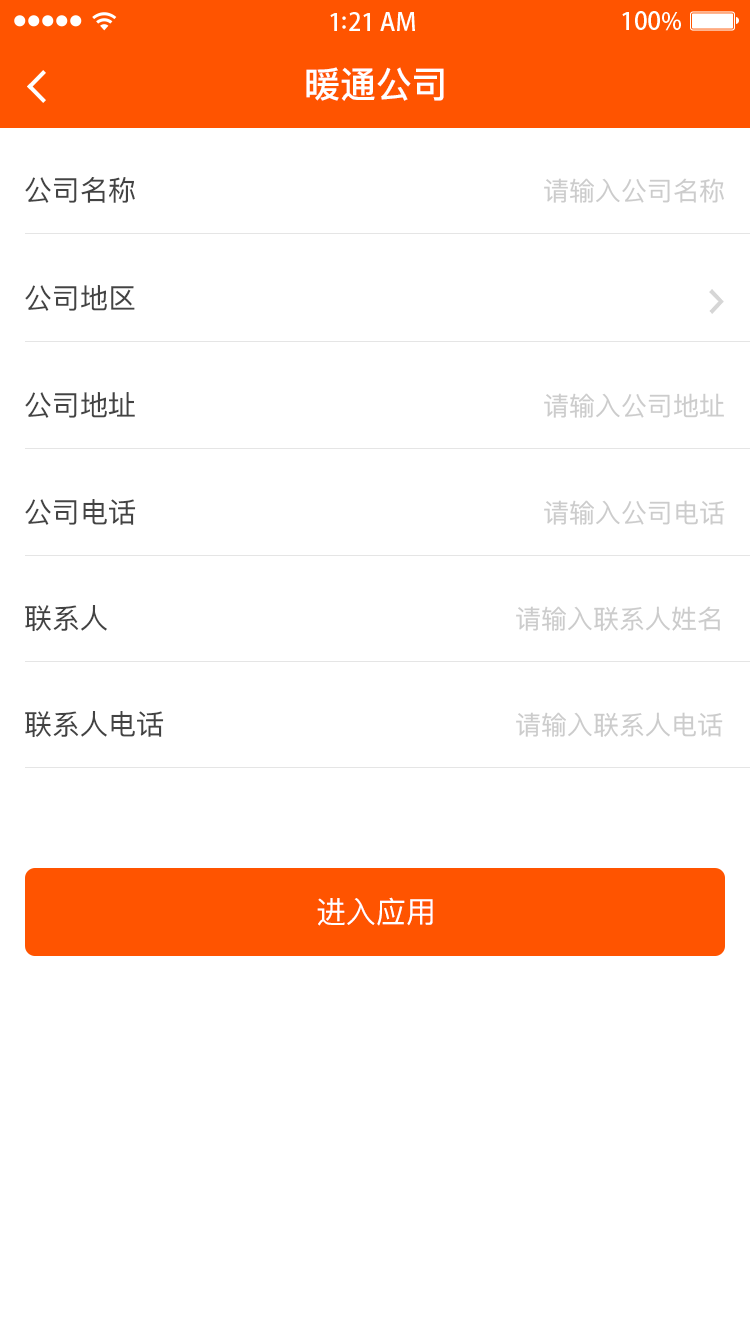
<style>
.page{position:relative;width:750px;height:1334px;background:#ffffff}
.page>*{position:absolute;margin:0}
.t1{font:36px "PingFangSC-Medium";color:#ffffff}
.t2{font:28px "PingFangSC-Regular";color:#434343}
.t3{font:26px "PingFangSC-Regular";color:#cccccc}
.t4{font:30px "PingFangSC-Regular";color:#ffffff;text-transform:uppercase}
</style>
<div class="page">
<p class="t1" style="left:306px;top:67px;width:138px;height:34px">暖通公司</p>
<p class="t2" style="left:25px;top:177px;width:110px;height:26px">公司名称</p>
<p class="t3" style="left:544px;top:178px;width:180px;height:25px">请输入公司名称</p>
<p class="t2" style="left:25px;top:285px;width:110px;height:26px">公司地区</p>
<p class="t2" style="left:25px;top:392px;width:110px;height:26px">公司地址</p>
<p class="t3" style="left:544px;top:393px;width:180px;height:25px">请输入公司地址</p>
<p class="t2" style="left:25px;top:499px;width:111px;height:26px">公司电话</p>
<p class="t3" style="left:544px;top:500px;width:181px;height:25px">请输入公司电话</p>
<p class="t2" style="left:25px;top:605px;width:82px;height:27px">联系人</p>
<p class="t3" style="left:516px;top:606px;width:204px;height:25px">请输入联系人姓名</p>
<p class="t2" style="left:25px;top:711px;width:139px;height:27px">联系人电话</p>
<p class="t3" style="left:516px;top:712px;width:207px;height:25px">请输入联系人电话</p>
<p class="t4" style="left:317px;top:897px;width:116px;height:29px">进入应用</p>
</div>
